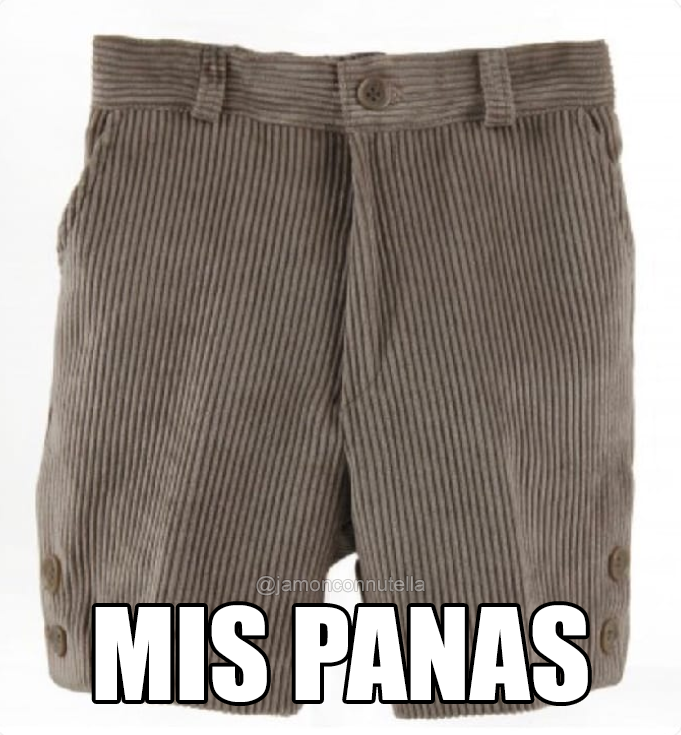
<style>
.page{position:relative;width:681px;height:735px}
.page>*{position:absolute;margin:0}
.t1{font:117.6px "Impact";color:#ffffff}
</style>
<div class="page">
<p class="t1" style="left:95px;top:605px;width:493px;height:97px">MIS PANAS</p>
</div>
